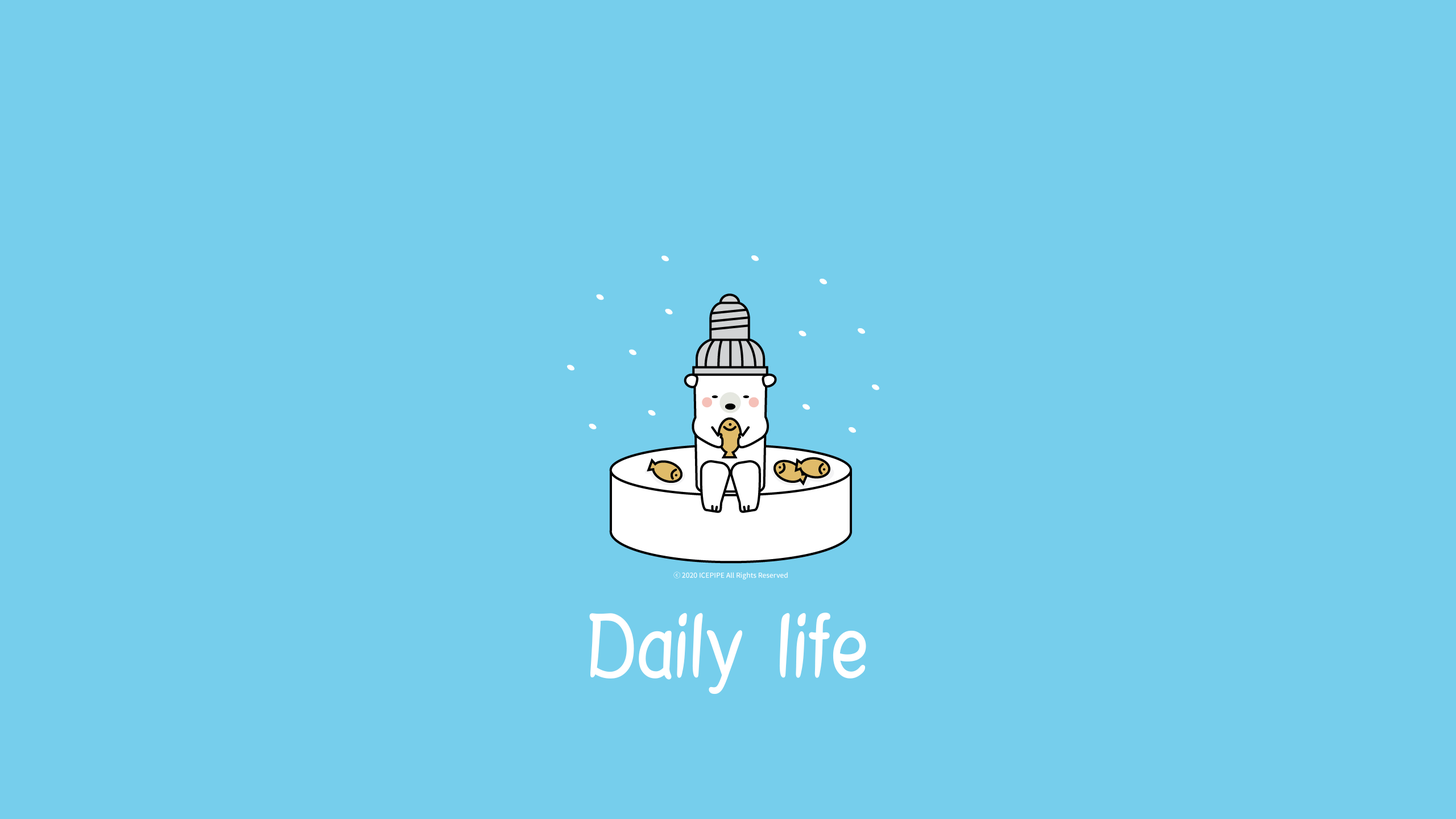
<style>
.page{position:relative;width:1456px;height:819px;background:#76ceec}
.page>*{position:absolute;margin:0}
.t1{font:87.5px "MDAlong";color:#ffffff;font-weight:bold;scale:0.81 1}
</style>
<div class="page">
<p class="t1" style="left:589px;top:613px;width:277px;height:81px">Daily life</p>
</div>
